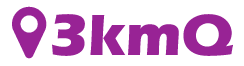
<style>
.page{position:relative;width:244px;height:66px;background:#ffffff}
.page>*{position:absolute;margin:0}
.t1{font:60px "ErasITC-Bold";color:#982395}
</style>
<div class="page">
<p class="t1" style="left:52px;top:14px;width:181px;height:42px">3kmQ</p>
</div>
